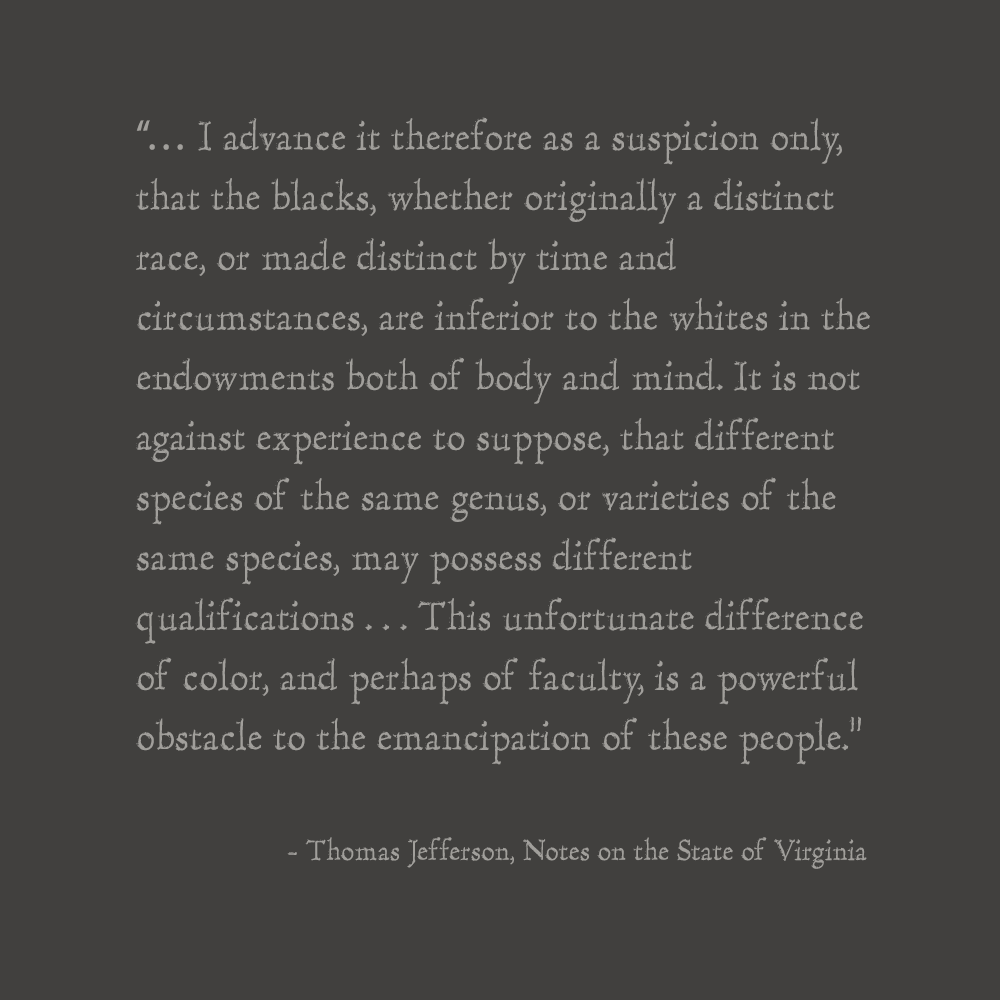
<style>
.page{position:relative;width:1000px;height:1000px;background:#41403e}
.page>*{position:absolute;margin:0}
.t1{font:42px/60px "HultogEngraved";color:#a19f9b}
.t2{font:42px/60px "MyriadPro-Regular";color:#a19f9b}
.t3{font:30px "HultogEngraved";color:#a19f9b}
</style>
<div class="page">
<p class="t1" style="left:135px;top:117px;width:735px;height:648px"><span class="t2">“…</span> I advance it therefore as a suspicion only, that the blacks, whether originally a distinct race, or made distinct by time and circumstances, are inferior to the whites in the endowments both of body and mind. It is not against experience to suppose, that different species of the same genus, or varieties of the same species, may possess different qualifications . . . This unfortunate difference of color, and perhaps of faculty, is a powerful obstacle to the emancipation of these people.”</p>
<p class="t3" style="left:287px;top:837px;width:580px;height:32px">- Thomas Jefferson, Notes on the State of Virginia</p>
</div>
